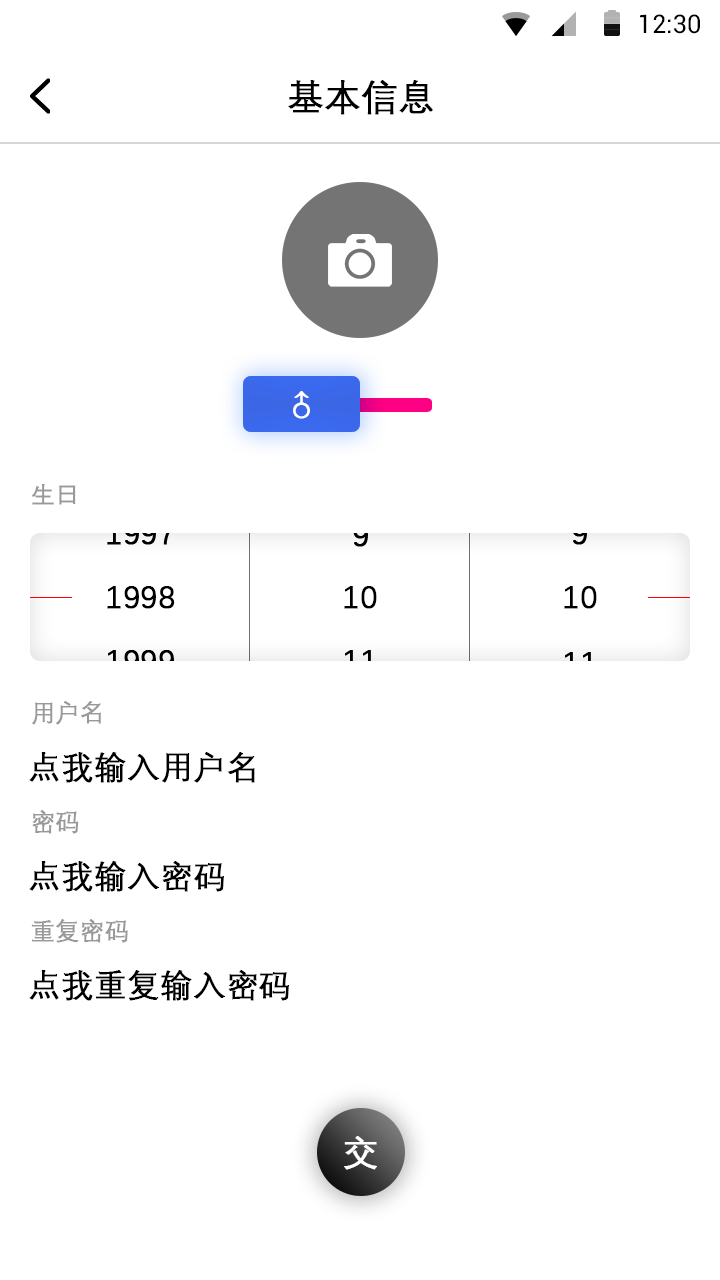
<style>
.page{position:relative;width:720px;height:1280px;background:#ffffff}
.page>*{position:absolute;margin:0}
.t1{font:25.4px "Roboto-Regular";color:#000000}
.t2{font:36px "DengXian-Regular";color:#000000;font-weight:bold}
.t3{font:36px "DengXian-Regular";color:#ffffff;font-weight:bold}
.t4{font:24px "DengXian-Regular";color:#999999;font-weight:bold}
.t5{font:32px "DengXian-Regular";color:#000000;font-weight:bold}
</style>
<div class="page">
<p class="t1" style="left:640px;top:14px;width:60px;height:20px">12:30</p>
<p class="t2" style="left:288px;top:80px;width:145px;height:35px">基本信息</p>
<p class="t3" style="left:293px;top:391px;width:17px;height:28px">♂</p>
<p class="t4" style="left:32px;top:484px;width:44px;height:21px">生日</p>
<p class="t5" style="left:107px;top:586px;width:68px;height:23px">1998</p>
<p class="t5" style="left:344px;top:586px;width:33px;height:23px">10</p>
<p class="t5" style="left:564px;top:586px;width:33px;height:23px">10</p>
<p class="t4" style="left:32px;top:701px;width:69px;height:24px">用户名</p>
<p class="t5" style="left:29px;top:752px;width:226px;height:31px">点我输入用户名</p>
<p class="t4" style="left:32px;top:810px;width:47px;height:24px">密码</p>
<p class="t5" style="left:29px;top:861px;width:195px;height:31px">点我输入密码</p>
<p class="t4" style="left:31px;top:919px;width:97px;height:24px">重复密码</p>
<p class="t5" style="left:29px;top:970px;width:260px;height:31px">点我重复输入密码</p>
<p class="t3" style="left:344px;top:1136px;width:33px;height:34px">交</p>
</div>
